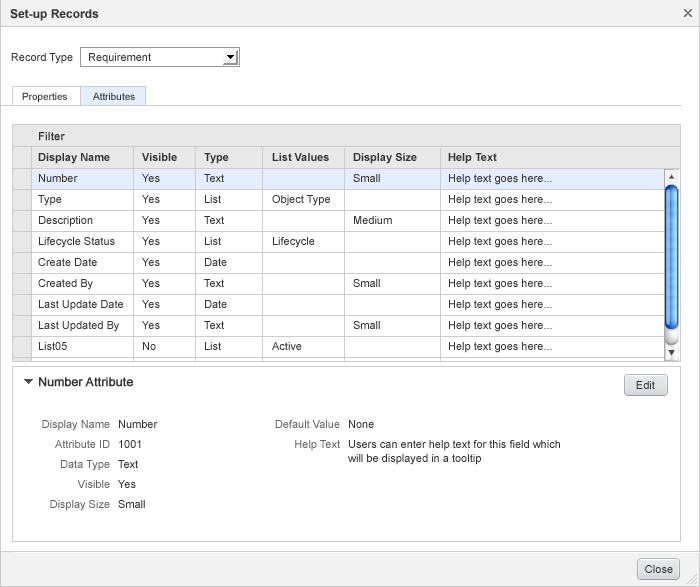
<style>
.page{position:relative;width:700px;height:587px;background:#ffffff}
.page>*{position:absolute;margin:0}
.t1{font:12px "Arial-BoldMT";color:#333333}
.t2{font:11px "ArialMT";color:#333333}
.t3{font:10px "ArialMT";color:#333333}
.t4{font:11px "ArialMT";letter-spacing:0.005em;color:#333333;font-weight:bold}
.t5{font:11px/21px "ArialMT";color:#333333}
.t6{font:11px/21px "Arial-BoldMT";color:#333333}
.t7{font:12px "ArialMT";color:#333333;font-weight:bold}
.t8{font:11px "ArialMT";letter-spacing:0.005em;color:#333333}
.t9{font:11px/20px "ArialMT";color:#666666}
.t10{font:11px/20px "ArialMT";color:#333333}
.t11{font:11px/14px "ArialMT";color:#333333}
</style>
<div class="page">
<p class="t1" style="left:10px;top:9px;width:89px;height:12px">Set-up Records</p>
<p class="t2" style="left:11px;top:53px;width:62px;height:11px">Record Type</p>
<p class="t2" style="left:89px;top:53px;width:62px;height:11px">Requirement</p>
<p class="t3" style="left:22px;top:92px;width:45px;height:10px">Properties</p>
<p class="t3" style="left:93px;top:92px;width:42px;height:8px">Attributes</p>
<p class="t4" style="left:39px;top:132px;width:26px;height:9px">Filter</p>
<p class="t5" style="left:38px;top:153px;width:85px;height:197px"><span class="t6">Display Name<br></span>Number<br>Type<br>Description<br>Lifecycle Status<br>Create Date<br>Created By<br>Last Update Date<br>Last Updated By<br>List05</p>
<p class="t5" style="left:142px;top:153px;width:35px;height:197px"><span class="t6">Visible<br></span>Yes<br>Yes<br>Yes<br>Yes<br>Yes<br>Yes<br>Yes<br>Yes<br>No</p>
<p class="t5" style="left:204px;top:153px;width:25px;height:197px"><span class="t6">Type<br></span>Text<br>List<br>Text<br>List<br>Date<br>Text<br>Date<br>Text<br>List</p>
<p class="t5" style="left:272px;top:153px;width:58px;height:197px"><span class="t6">List Values<br></span><br>Object Type<br><br>Lifecycle<br><br><br><br><br>Active</p>
<p class="t5" style="left:353px;top:153px;width:64px;height:176px"><span class="t6">Display Size<br></span>Small<br><br>Medium<br><br><br>Small<br><br>Small</p>
<p class="t5" style="left:448px;top:153px;width:104px;height:200px"><span class="t6">Help Text<br></span>Help text goes here...<br>Help text goes here...<br>Help text goes here...<br>Help text goes here...<br>Help text goes here...<br>Help text goes here...<br>Help text goes here...<br>Help text goes here...<br>Help text goes here...</p>
<p class="t7" style="left:39px;top:377px;width:94px;height:10px">Number Attribute</p>
<p class="t8" style="left:636px;top:381px;width:19px;height:8px">Edit</p>
<p class="t9" style="left:42px;top:420px;width:68px;height:91px;text-align:right">Display Name<br>Attribute ID<br>Data Type<br>Visible<br>Display Size</p>
<p class="t10" style="left:118px;top:420px;width:40px;height:88px">Number<br>1001<br>Text<br>Yes<br>Small</p>
<p class="t9" style="left:275px;top:420px;width:65px;height:31px;text-align:right">Default Value<br>Help Text</p>
<p class="t10" style="left:348px;top:420px;width:212px;height:45px">None<br>Users can enter help text for this field which<br><span class="t11">will be displayed in a tooltip</span></p>
<p class="t8" style="left:645px;top:565px;width:28px;height:8px">Close</p>
</div>
